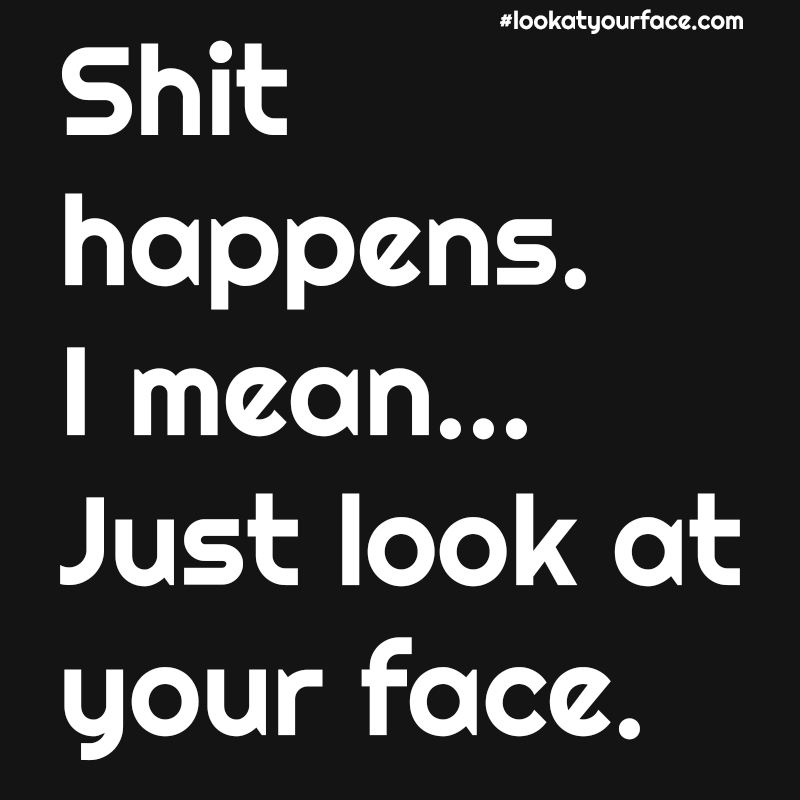
<style>
.page{position:relative;width:800px;height:800px;background:#141414}
.page>*{position:absolute;margin:0}
.t1{font:25px "Righteous-Regular";color:#ffffff}
.t2{font:125px "Righteous-Regular";color:#ffffff}
</style>
<div class="page">
<p class="t1" style="left:500px;top:9px;width:243px;height:25px">#lookatyourface.com</p>
<p class="t2" style="left:60px;top:40px;width:680px;height:721px">Shit<br>happens.<br>I mean...<br>Just look at <br>your face.</p>
</div>
